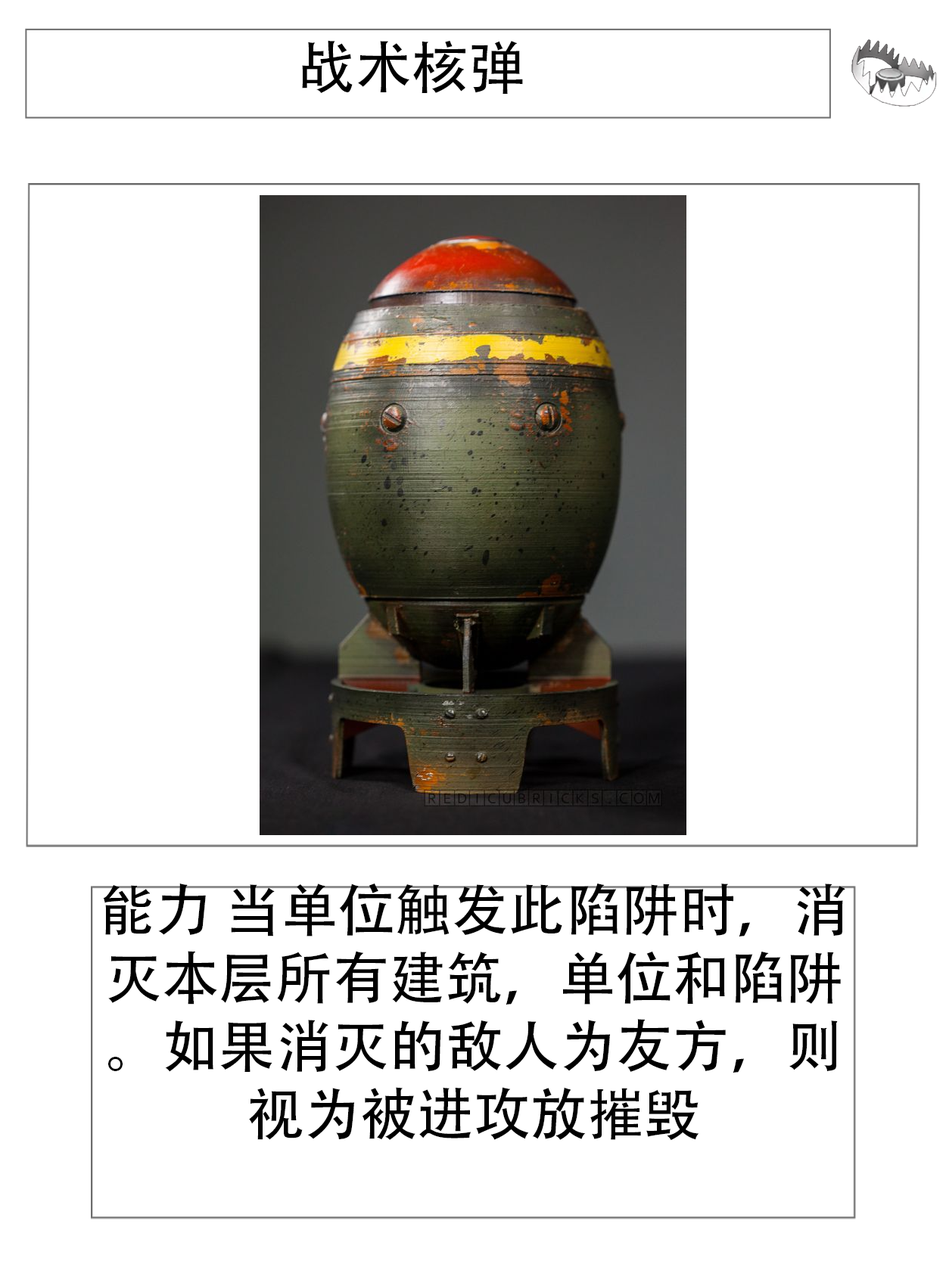
<style>
.page{position:relative;width:946px;height:1261px;background:#ffffff}
.page>*{position:absolute;margin:0}
.t1{font:56.7px "AdobeHeitiStd-Regular";color:#000000}
</style>
<div class="page">
<p class="t1" style="left:302px;top:40px;width:221px;height:54px">战术核弹</p>
<p class="t1" style="left:103px;top:883px;width:742px;height:258px;text-align:center">能力 当单位触发此陷阱时，消灭本层所有建筑，单位和陷阱。如果消灭的敌人为友方，则视为被进攻放摧毁</p>
</div>
